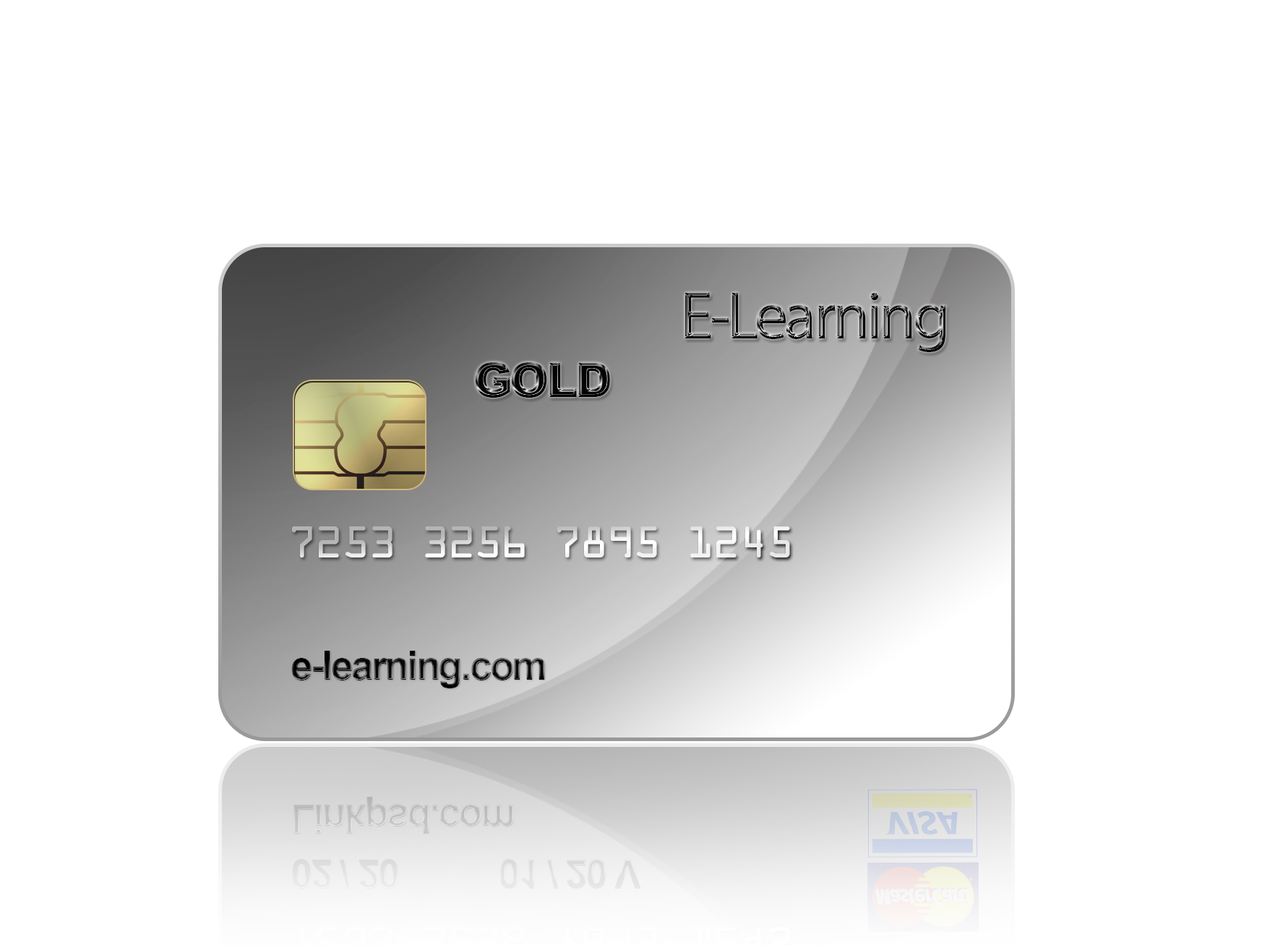
<style>
.page{position:relative;width:1262px;height:945px;background:#ffffff}
.page>*{position:absolute;margin:0}
.t1{font:67.2px "MyriadPro-Regular";letter-spacing:-0.05em}
.t2{font:47px "Arial-Black";letter-spacing:-0.05em}
.t3{font:39.6px "OCRAStd";letter-spacing:-0.05em}
.t4{font:39.8px "Arial-BoldMT";letter-spacing:-0.05em}
</style>
<div class="page">
<p class="t1" style="left:685px;top:293px;width:261px;height:59px">E-Learning</p>
<p class="t2" style="left:476px;top:362px;width:134px;height:36px">GOLD</p>
<p class="t3" style="left:292px;top:526px;width:498px;height:31px">7253 3256 7895 1245</p>
<p class="t4" style="left:291px;top:651px;width:254px;height:37px">e-learning.com</p>
</div>
